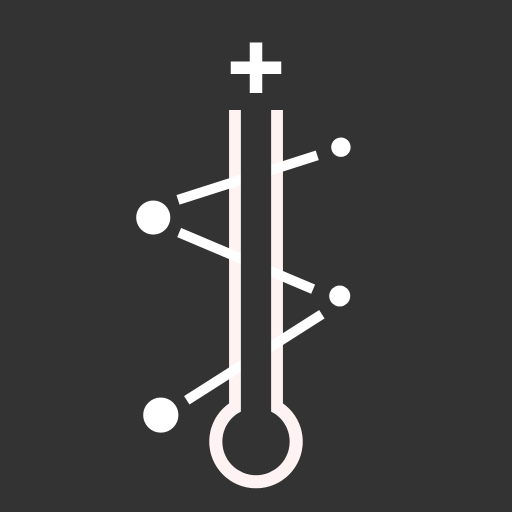
<style>
.page{position:relative;width:512px;height:512px;background:#333333}
.page>*{position:absolute;margin:0}
.t1{font:99.1px "HelveticaNeueLTPro-BdCn";letter-spacing:0.02em;color:#ffffff}
</style>
<div class="page">
<p class="t1" style="left:230px;top:42px;width:52px;height:51px">+</p>
</div>
